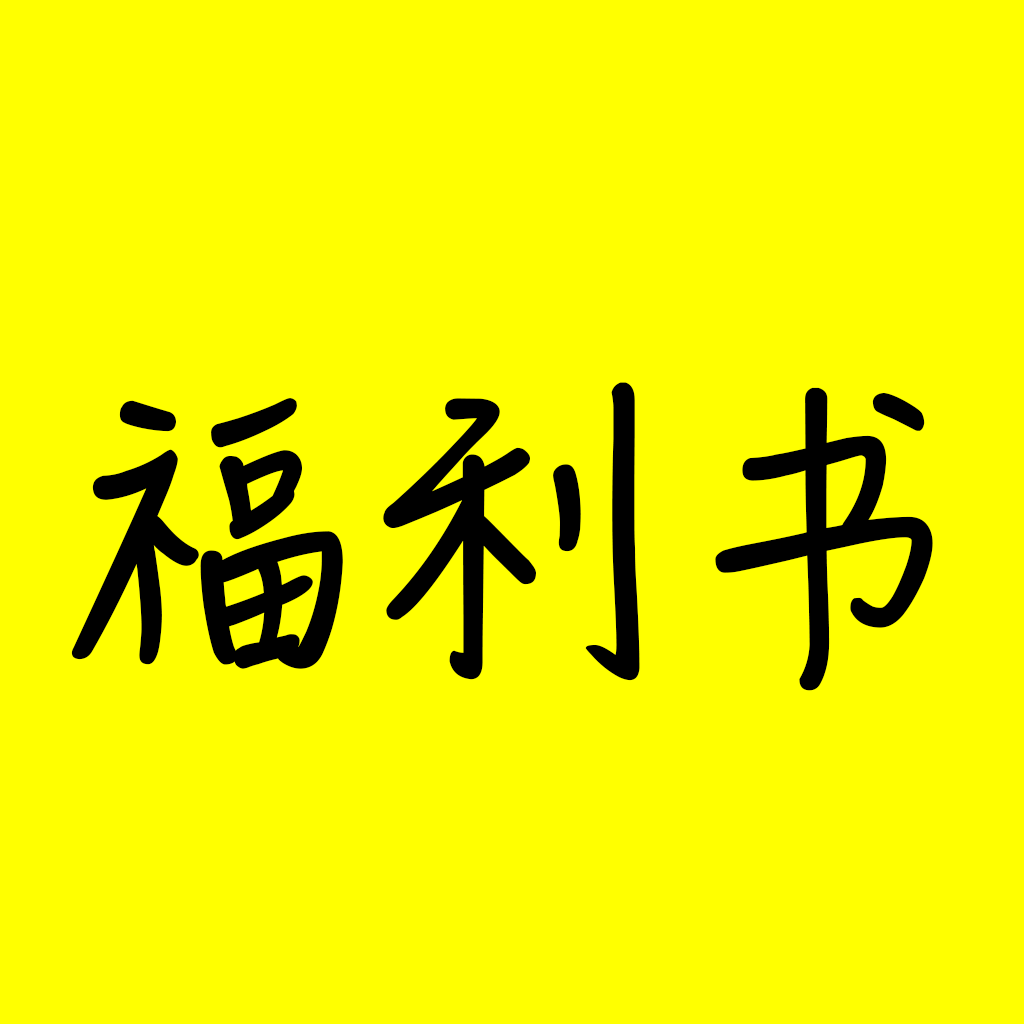
<style>
.page{position:relative;width:1024px;height:1024px;background:#ffff00}
.page>*{position:absolute;margin:0}
.t1{font:300px "HanziPenSC-W5";color:#000000}
</style>
<div class="page">
<p class="t1" style="left:71px;top:382px;width:862px;height:309px">福利书</p>
</div>
